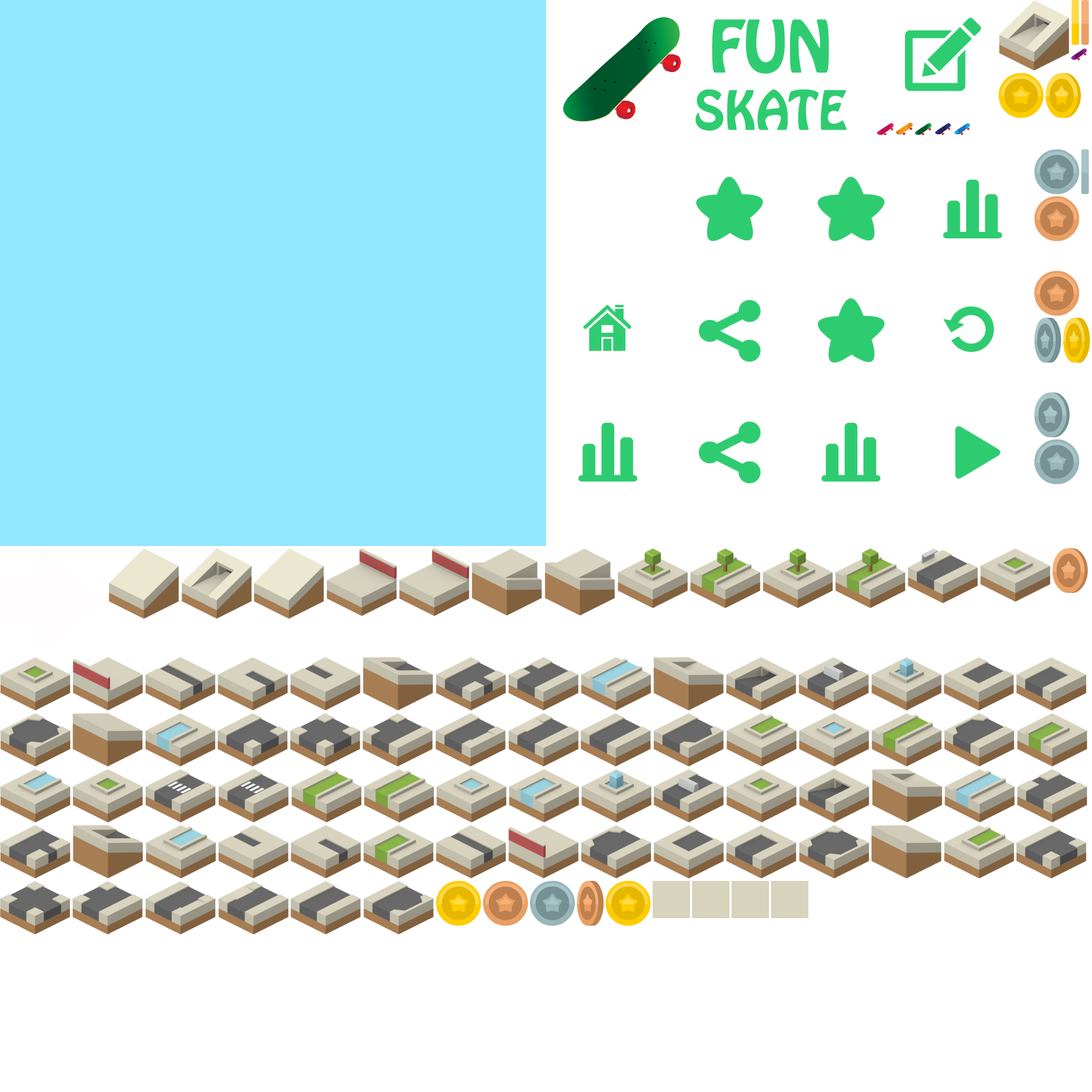
<style>
.page{position:relative;width:1092px;height:1092px;background:#ffffff}
.page>*{position:absolute;margin:0}
.t1{font:47.8px "HoboStd";color:#2ecc71;text-transform:uppercase}
.t2{font:63.7px "HoboStd";color:#2ecc71;text-transform:uppercase}
</style>
<div class="page">
<p class="t1" style="left:695px;top:19px;width:152px;height:112px;text-align:center"><span class="t2"> fun <br></span>skate</p>
</div>
